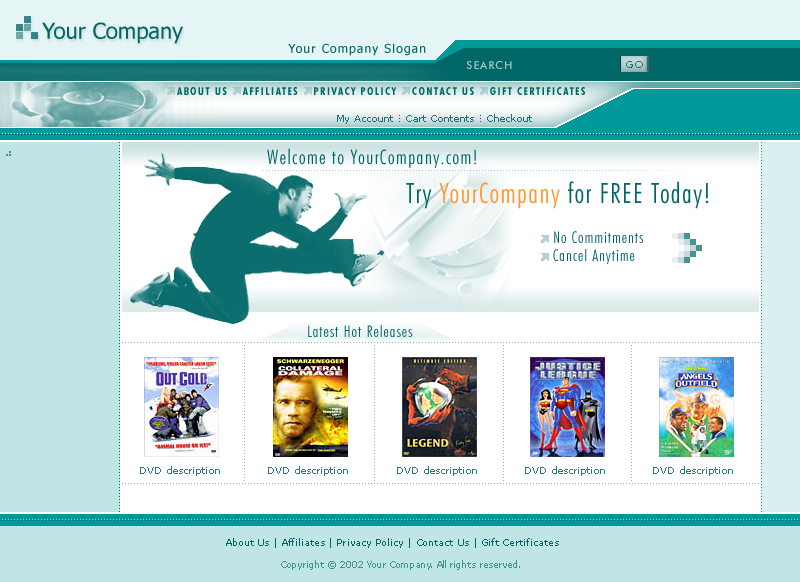
<style>
.page{position:relative;width:800px;height:582px;background:#ffffff}
.page>*{position:absolute;margin:0}
.t1{font:22px "Tahoma";color:#006666}
.t2{font:12px "Tahoma";letter-spacing:0.1em;color:#006666}
.t3{font:11px "FuturaBT-Medium";letter-spacing:0.075em;color:#a6caca}
.t4{font:10px "FuturaBT-Medium";letter-spacing:0.05em;color:#1b7575}
.t5{font:11px "FuturaBT-BoldCondensed";letter-spacing:0.15em;color:#006666;text-transform:uppercase}
.t6{font:10px "Verdana";color:#006666}
.t7{font:20px "FuturaBT-LightCondensed";letter-spacing:0.065em;color:#006666}
.t8{font:28px "FuturaBT-LightCondensed";letter-spacing:0.05em;color:#006666}
.t9{font:28px "FuturaBT-LightCondensed";letter-spacing:0.05em;color:#ff9933}
.t10{font:16px/18px "FuturaBT-LightCondensed";letter-spacing:0.065em;color:#006666}
.t11{font:16px "FuturaBT-LightCondensed";letter-spacing:0.065em;color:#006666}
.t12{font:10px "Verdana";color:#267d7d}
.t13{font:9px "Verdana";letter-spacing:0.05em;color:#006666}
.t14{font:9px "Verdana";color:#439292}
</style>
<div class="page">
<p class="t1" style="left:42px;top:22px;width:141px;height:22px">Your Company</p>
<p class="t2" style="left:288px;top:43px;width:138px;height:13px">Your Company Slogan</p>
<p class="t3" style="left:466px;top:61px;width:46px;height:8px">SEARCH</p>
<p class="t4" style="left:626px;top:61px;width:17px;height:7px">GO</p>
<p class="t5" style="left:177px;top:87px;width:408px;height:8px">About Us    Affiliates    Privacy Policy    Contact Us    Gift Certificates</p>
<p class="t6" style="left:337px;top:114px;width:195px;height:10px;opacity:0.9">My Account   Cart Contents   Checkout</p>
<p class="t7" style="left:267px;top:148px;width:209px;height:20px">Welcome to YourCompany.com!</p>
<p class="t8" style="left:406px;top:181px;width:303px;height:28px">Try <span class="t9">YourCompany</span> for FREE Today!</p>
<p class="t10" style="left:553px;top:231px;width:91px;height:33px">No Commitments<br>Cancel Anytime</p>
<p class="t11" style="left:308px;top:325px;width:105px;height:12px">Latest Hot Releases</p>
<p class="t12" style="left:140px;top:466px;width:80px;height:10px">DVD description</p>
<p class="t12" style="left:268px;top:466px;width:80px;height:10px">DVD description</p>
<p class="t12" style="left:397px;top:466px;width:80px;height:10px">DVD description</p>
<p class="t12" style="left:525px;top:466px;width:80px;height:10px">DVD description</p>
<p class="t12" style="left:653px;top:466px;width:80px;height:10px">DVD description</p>
<p class="t13" style="left:226px;top:538px;width:333px;height:10px">About Us | Affiliates | Privacy Policy | Contact Us | Gift Certificates</p>
<p class="t14" style="left:281px;top:560px;width:239px;height:10px">Copyright © 2002 Your Company. All rights reserved.</p>
</div>
